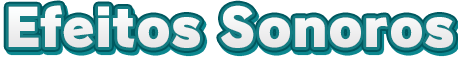
<style>
.page{position:relative;width:458px;height:58px;background:#ffffff}
.page>*{position:absolute;margin:0}
.t1{font:51.7px "RodinPro-UB";color:#f0f0f1}
</style>
<div class="page">
<p class="t1" style="left:8px;top:5px;width:445px;height:43px">Efeitos Sonoros</p>
</div>
